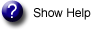
<style>
.page{position:relative;width:91px;height:30px;background:#ffffff}
.page>*{position:absolute;margin:0}
.t1{font:19.8px "ArialMT";color:#ffffff}
.t2{font:12px "ArialMT";color:#000000}
</style>
<div class="page">
<p class="t1" style="left:7px;top:3px;width:10px;height:15px">?</p>
<p class="t2" style="left:33px;top:8px;width:58px;height:12px">Show Help</p>
</div>
